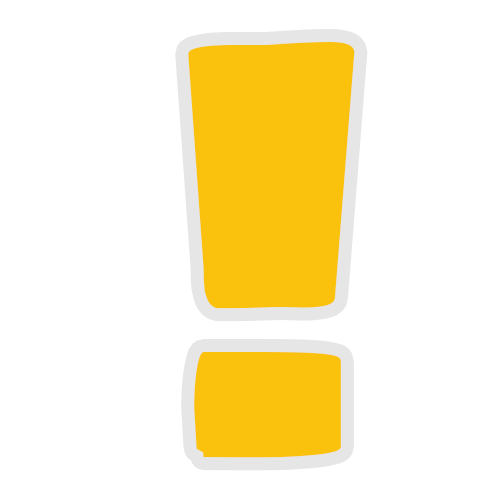
<style>
.page{position:relative;width:500px;height:500px;background:#ffffff}
.page>*{position:absolute;margin:0}
.t1{font:552.1px "BowlbyOneSC-Regular";color:#fac20d}
</style>
<div class="page">
<p class="t1" style="left:188px;top:42px;width:167px;height:416px">!</p>
</div>
